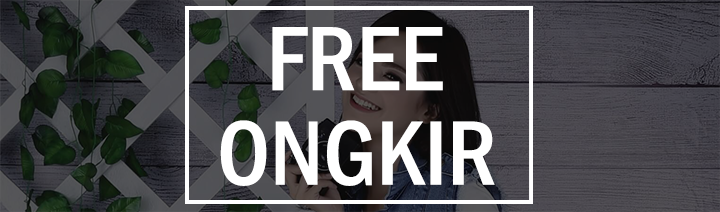
<style>
.page{position:relative;width:720px;height:212px}
.page>*{position:absolute;margin:0}
.t1{font:94.4px "FranklinGothic-MediumCond";color:#ffffff}
</style>
<div class="page">
<p class="t1" style="left:272px;top:27px;width:171px;height:64px">FREE</p>
<p class="t1" style="left:220px;top:120px;width:275px;height:66px">ONGKIR</p>
</div>
